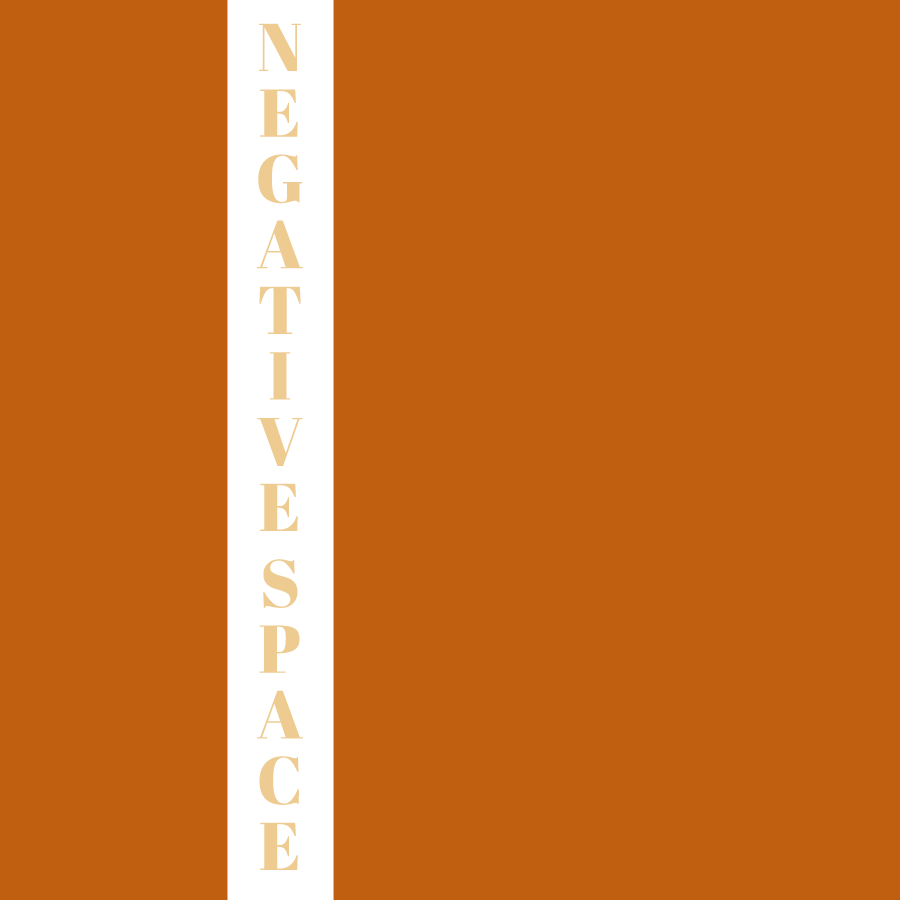
<style>
.page{position:relative;width:900px;height:900px;background:#c15f11}
.page>*{position:absolute;margin:0}
.t1{font:67.4px "AbrilFatface-Regular";letter-spacing:-0.025em;color:#eecc91}
</style>
<div class="page">
<p class="t1" style="left:257px;top:23px;width:46px;height:847px">NEGATIVE SPACE</p>
</div>
